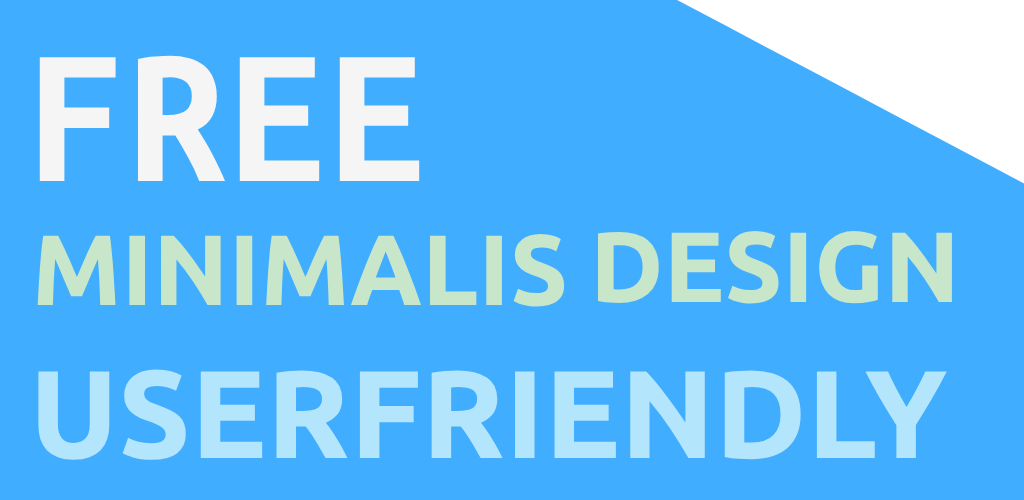
<style>
.page{position:relative;width:1024px;height:500px;background:#40adff}
.page>*{position:absolute;margin:0}
.t1{font:200px "UbuntuMono-Bold";color:#f5f5f5}
.t2{font:100px "Ubuntu-Bold";color:#c8e6c9}
.t3{font:125px "Ubuntu-Bold";color:#b3e5fc}
</style>
<div class="page">
<p class="t1" style="left:39px;top:55px;width:381px;height:126px">FREE</p>
<p class="t2" style="left:598px;top:231px;width:354px;height:73px">DESIGN</p>
<p class="t2" style="left:37px;top:234px;width:528px;height:73px">MINIMALIS</p>
<p class="t3" style="left:38px;top:369px;width:909px;height:91px">USERFRIENDLY</p>
</div>
